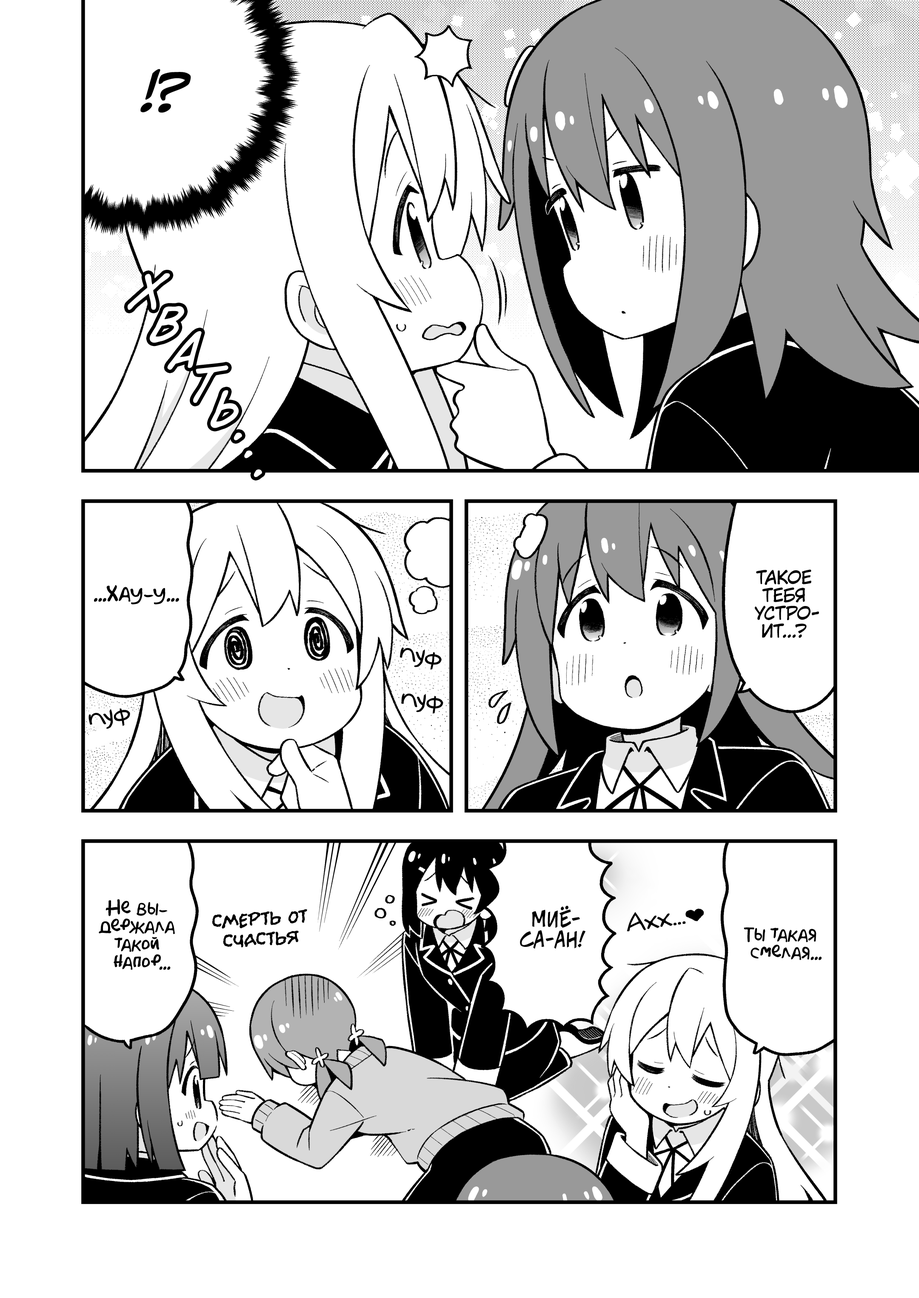
<style>
.page{position:relative;width:919px;height:1298px;background:#ffffff}
.page>*{position:absolute;margin:0}
.t1{font:45.9px "CCMeanwhile";color:#000000;text-transform:uppercase;font-style:italic}
.t2{font:45.9px "v_CCDearDiary";color:#ffffff;text-transform:uppercase}
.t3{font:17.9px "KuraiVoice2";color:#000000;text-transform:uppercase}
.t4{font:20.4px "AkbarPlain";color:#000000}
.t5{font:25.5px "v_Augie";color:#000000}
.t6{font:17.9px "AkbarPlain";color:#000000}
.t7{font:20.4px "v_CCJeffCampbell";color:#000000;text-transform:uppercase}
.t8{font:20.4px "el_CCEvilSchemes";color:#000000;text-transform:uppercase}
</style>
<div class="page">
<p class="t1" style="left:140px;top:69px;width:51px;height:44px">!?</p>
<p class="t2" style="left:127px;top:273px;width:43px;height:37px;rotate:7deg">х</p>
<p class="t2" style="left:149px;top:306px;width:35px;height:37px;rotate:5deg">в</p>
<p class="t2" style="left:167px;top:331px;width:35px;height:39px;rotate:4deg">а</p>
<p class="t2" style="left:193px;top:365px;width:35px;height:38px;rotate:7deg">т</p>
<p class="t2" style="left:210px;top:390px;width:29px;height:38px">ь</p>
<p class="t2" style="left:234px;top:432px;width:8px;height:8px">.</p>
<p class="t2" style="left:244px;top:450px;width:9px;height:8px">.</p>
<p class="t2" style="left:254px;top:469px;width:8px;height:8px">.</p>
<p class="t3" style="left:755px;top:569px;width:64px;height:69px;text-align:center">Такое<br>тебя<br>устро-<br>ит...?</p>
<p class="t4" style="left:94px;top:585px;width:85px;height:19px">...Хау-у...</p>
<p class="t5" style="left:400px;top:647px;width:42px;height:23px;rotate:9deg">пуф</p>
<p class="t5" style="left:401px;top:693px;width:42px;height:20px;rotate:5deg">пуф</p>
<p class="t5" style="left:88px;top:708px;width:42px;height:21px;rotate:-10deg">пуф</p>
<p class="t6" style="left:99px;top:899px;width:76px;height:71px;text-align:center">Не вы-<br>держала<br>такой<br>напор...</p>
<p class="t7" style="left:520px;top:905px;width:65px;height:43px;text-align:center">Миё-<br>са-ан!</p>
<p class="t8" style="left:212px;top:909px;width:95px;height:38px;text-align:center;rotate:-4deg">Смерть от<br>счастья</p>
<p class="t5" style="left:627px;top:912px;width:59px;height:19px;rotate:-9deg">Ахх...</p>
<p class="t6" style="left:744px;top:927px;width:78px;height:33px;text-align:center">Ты такая<br>смелая...</p>
</div>
